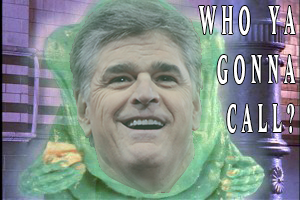
<style>
.page{position:relative;width:300px;height:200px}
.page>*{position:absolute;margin:0}
.t1{font:40.9px "Ghostbusters";letter-spacing:0.32em;color:#ffffff;scale:0.39 1}
</style>
<div class="page">
<p class="t1" style="left:199px;top:6px;width:97px;height:127px;text-align:right">Who ya<br>gonna<br>call?</p>
</div>
